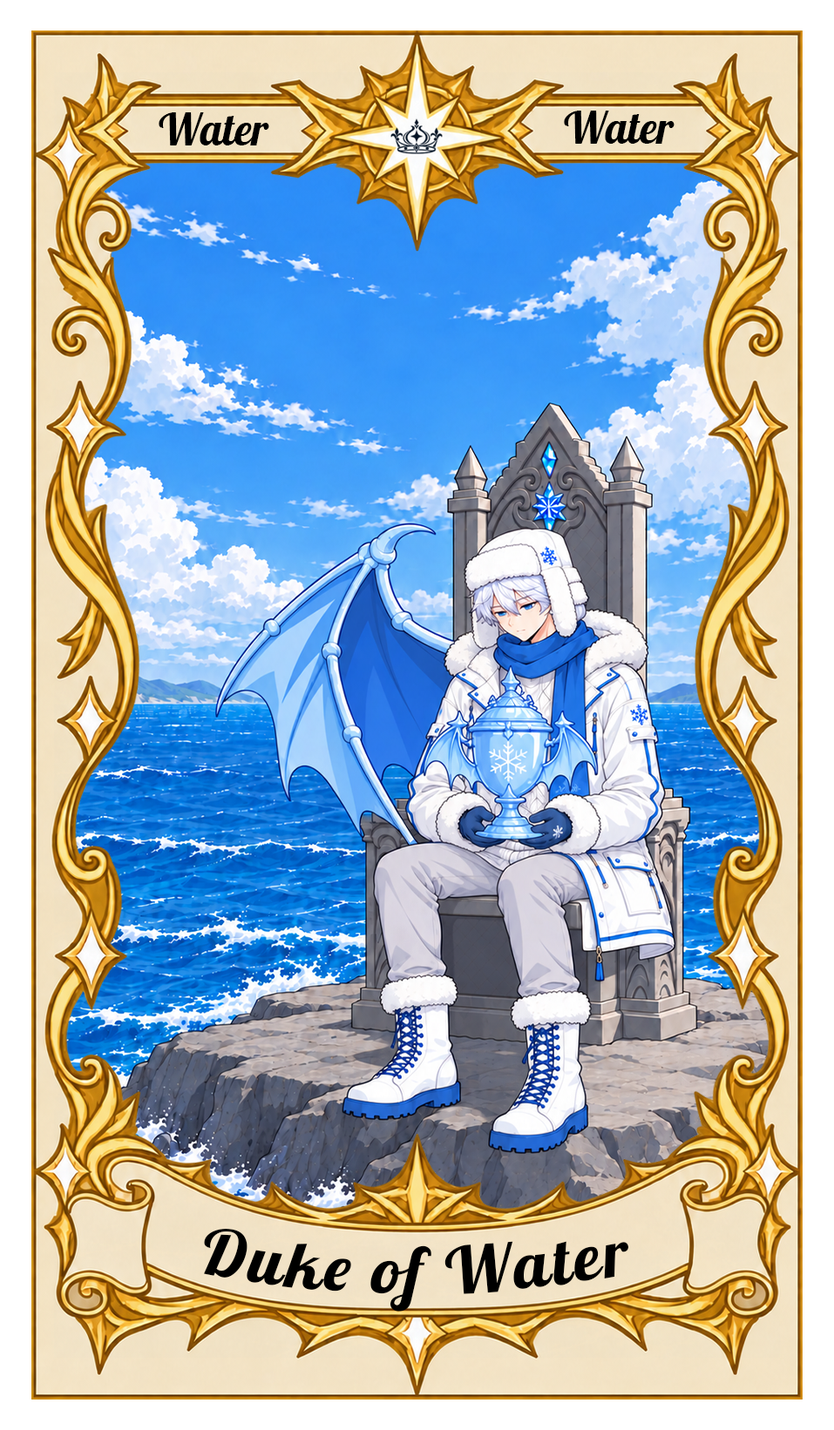
<style>
.page{position:relative;width:834px;height:1430px}
.page>*{position:absolute;margin:0}
.t1{font:43.6px "Lobster-Regular";color:#000000}
.t2{font:65.3px "Lobster-Regular";letter-spacing:0.05em;color:#000000}
</style>
<div class="page">
<p class="t1" style="left:159px;top:112px;width:110px;height:33px">Water</p>
<p class="t1" style="left:564px;top:111px;width:110px;height:33px">Water</p>
<p class="t2" style="left:204px;top:1229px;width:424px;height:83px">Duke of Water</p>
</div>
